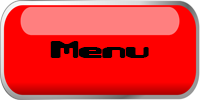
<style>
.page{position:relative;width:200px;height:100px;background:#ff0000}
.page>*{position:absolute;margin:0}
.t1{font:25px "MacropsiaBRK";color:#000000}
</style>
<div class="page">
<p class="t1" style="left:50px;top:41px;width:99px;height:17px">Menu</p>
</div>
